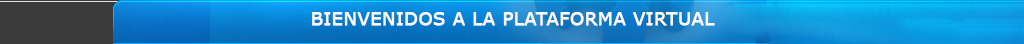
<style>
.page{position:relative;width:1024px;height:44px}
.page>*{position:absolute;margin:0}
.t1{font:18px "Verdana";color:#fffbff;font-weight:bold}
</style>
<div class="page">
<p class="t1" style="left:312px;top:12px;width:403px;height:14px">BIENVENIDOS A LA PLATAFORMA VIRTUAL</p>
</div>
